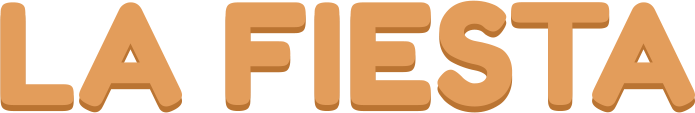
<style>
.page{position:relative;width:695px;height:113px;background:#ffffff}
.page>*{position:absolute;margin:0}
.t1{font:140px "FredokaOne-Regular";color:#e39d5b}
</style>
<div class="page">
<p class="t1" style="left:0px;top:6px;width:695px;height:107px">LA FIESTA</p>
<p class="t1" style="left:0px;top:0px;width:695px;height:107px">LA FIESTA</p>
</div>
